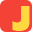
<style>
.page{position:relative;width:32px;height:32px;background:#f44336}
.page>*{position:absolute;margin:0}
.t1{font:30px "SansPosterBoldJL";color:#ffd740}
</style>
<div class="page">
<p class="t1" style="left:12px;top:6px;width:18px;height:25px">J</p>
</div>
